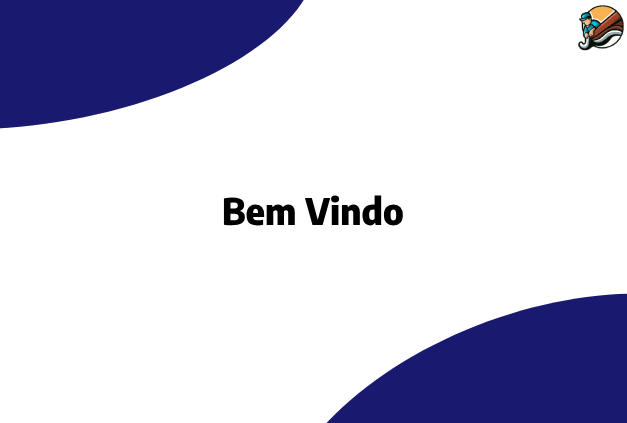
<style>
.page{position:relative;width:627px;height:423px;background:#ffffff}
.page>*{position:absolute;margin:0}
.t1{font:36.6px "EncodeSansSemiCondensed-ExtraBold";color:#000000}
</style>
<div class="page">
<p class="t1" style="left:223px;top:195px;width:180px;height:31px">Bem Vindo</p>
</div>
